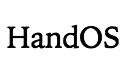
<style>
.page{position:relative;width:122px;height:80px;background:#ffffff}
.page>*{position:absolute;margin:0}
.t1{font:30px "IowanOldStyle-Roman";color:#030303}
</style>
<div class="page">
<p class="t1" style="left:7px;top:24px;width:112px;height:25px">HandOS</p>
</div>
